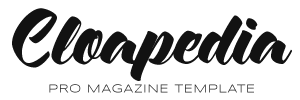
<style>
.page{position:relative;width:300px;height:100px;background:#ffffff}
.page>*{position:absolute;margin:0}
.t1{font:68.3px "FSZuliaPro";color:#121212}
.t2{font:12px "SyncopatePro-Regular";letter-spacing:0.06em}
</style>
<div class="page">
<p class="t1" style="left:12px;top:8px;width:280px;height:73px">Cloapedia</p>
<p class="t2" style="left:49px;top:84px;width:205px;height:9px">PRO MAGAZINE TEMPLATE</p>
</div>
